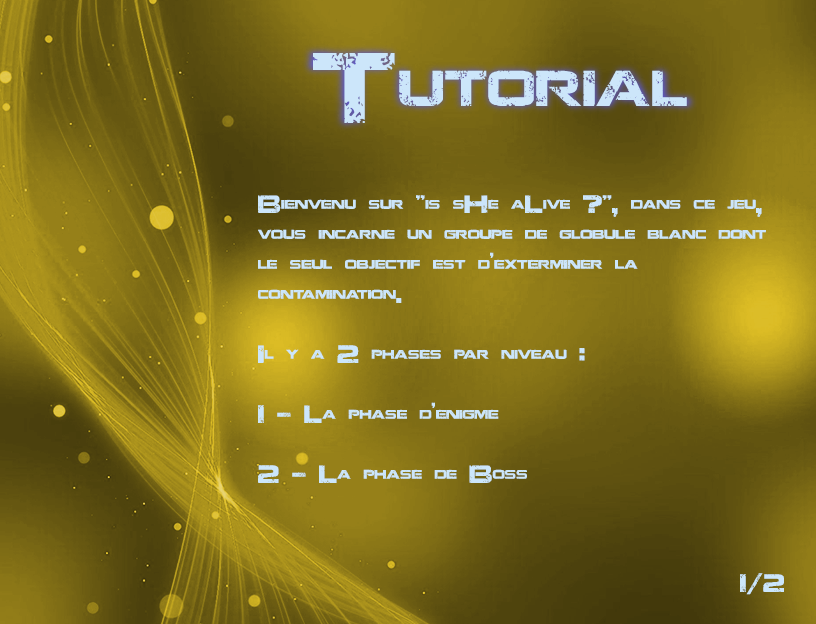
<style>
.page{position:relative;width:816px;height:624px}
.page>*{position:absolute;margin:0}
.t1{font:100px "JacintoSans";color:#cce6fa}
.t2{font:25px "JacintoSans";color:#cce6fa}
</style>
<div class="page">
<p class="t1" style="left:313px;top:53px;width:374px;height:70px">Tutorial</p>
<p class="t2" style="left:258px;top:195px;width:508px;height:288px">Bienvenu sur "is sHe aLive ?", dans ce jeu, vous incarne un groupe de globule blanc dont le seul objectif est d’exterminer la contamination.<br><br>Il y a 2 phases par niveau :<br><br>1 - La phase d’enigme<br><br>2 - La phase de Boss</p>
<p class="t2" style="left:740px;top:573px;width:44px;height:22px">1/2</p>
</div>
